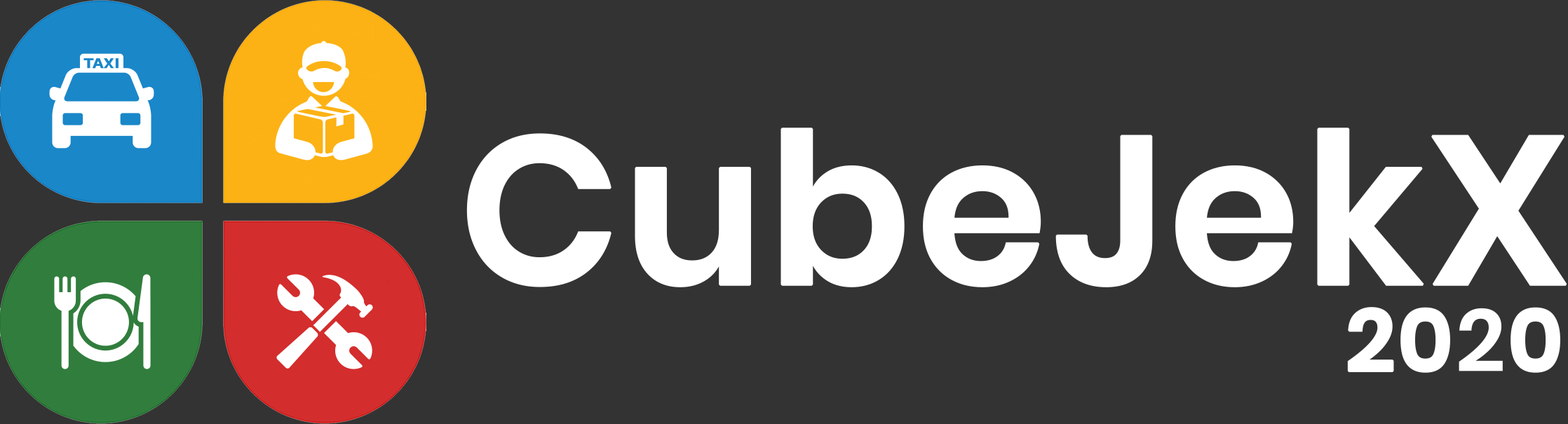
<style>
.page{position:relative;width:1568px;height:424px;background:#333333}
.page>*{position:absolute;margin:0}
.t1{font:210.4px "Poppins-SemiBold";color:#ffffff;font-weight:bold}
.t2{font:87.7px "Poppins-SemiBold";color:#ffffff;font-weight:bold}
</style>
<div class="page">
<p class="t1" style="left:466px;top:128px;width:1101px;height:160px">CubeJekX</p>
<p class="t2" style="left:1347px;top:307px;width:213px;height:66px">2020</p>
</div>
